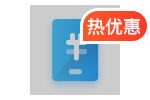
<style>
.page{position:relative;width:150px;height:100px;background:#ffffff}
.page>*{position:absolute;margin:0}
.t1{font:18px "PingFangSC-Medium";color:#ffffff}
</style>
<div class="page">
<p class="t1" style="left:87px;top:18px;width:54px;height:17px">热优惠</p>
</div>
